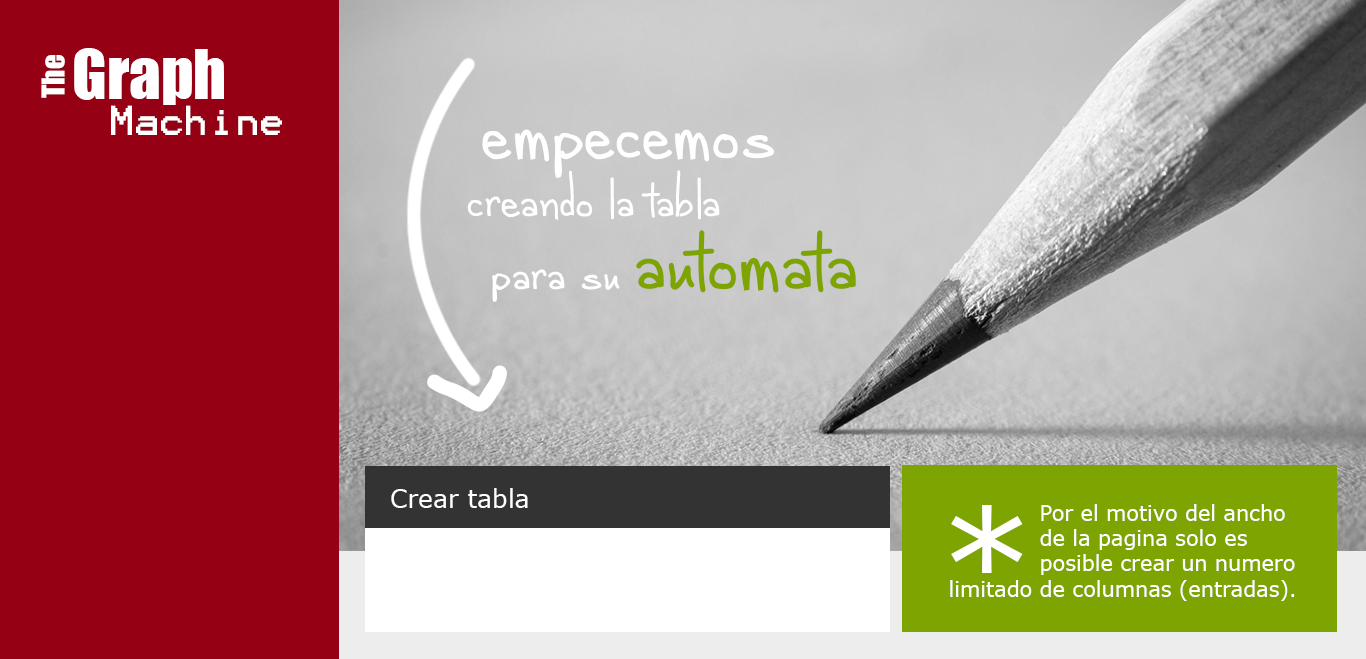
<style>
.page{position:relative;width:1366px;height:659px;background:#960014}
.page>*{position:absolute;margin:0}
.t1{font:62.5px "Impact";color:#ffffff}
.t2{font:29.2px "Impact";color:#ffffff}
.t3{font:33.3px "Terminal";color:#ffffff}
.t4{font:118.4px "alphabetizedcassettetapes";color:#ffffff}
.t5{font:75.3px "alphabetizedcassettetapes";color:#ffffff}
.t6{font:129.1px "alphabetizedcassettetapes";color:#7da400}
.t7{font:364.4px "alphabetizedcassettetapes";color:#ffffff}
.t8{font:25px "Verdana";color:#ffffff}
.t9{font:150px "Verdana";color:#ffffff}
.t10{font:20.8px "Verdana";color:#ffffff}
</style>
<div class="page">
<p class="t1" style="left:74px;top:48px;width:150px;height:57px">Graph</p>
<p class="t2" style="left:41px;top:55px;width:24px;height:43px;rotate:-90deg">The</p>
<p class="t3" style="left:111px;top:105px;width:171px;height:30px">Machine</p>
<p class="t4" style="left:482px;top:129px;width:293px;height:49px">empecemos</p>
<p class="t5" style="left:467px;top:170px;width:253px;height:50px">creando la tabla</p>
<p class="t6" style="left:492px;top:230px;width:364px;height:72px"><span class="t5">para su </span>automata</p>
<p class="t7" style="left:427px;top:365px;width:80px;height:47px;rotate:-94deg">&lt;</p>
<p class="t8" style="left:391px;top:488px;width:137px;height:20px">Crear tabla</p>
<p class="t9" style="left:951px;top:505px;width:72px;height:68px">*</p>
<p class="t10" style="left:1040px;top:504px;width:255px;height:71px">Por el motivo del ancho<br>de la pagina solo es <br>posible crear un numero</p>
<p class="t10" style="left:950px;top:580px;width:345px;height:21px">limitado de columnas (entradas).</p>
</div>
